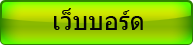
<style>
.page{position:relative;width:193px;height:45px}
.page>*{position:absolute;margin:0}
.t1{font:25px "Tahoma";color:#040404}
</style>
<div class="page">
<p class="t1" style="left:54px;top:8px;width:89px;height:22px">เว็บบอร์ด</p>
</div>
